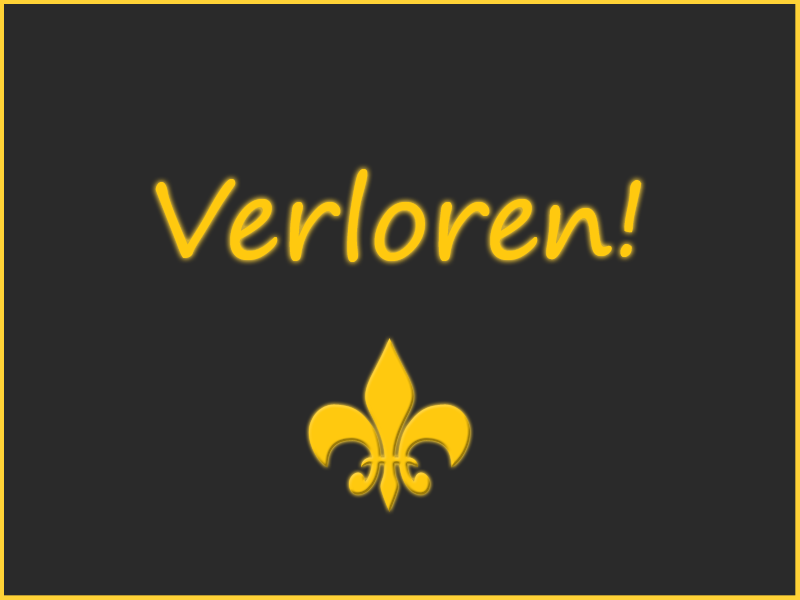
<style>
.page{position:relative;width:800px;height:600px;background:#2a2a2a}
.page>*{position:absolute;margin:0}
.t1{font:108px "SegoePrint";color:#ffc90f}
</style>
<div class="page">
<p class="t1" style="left:155px;top:169px;width:487px;height:93px">Verloren!</p>
</div>
